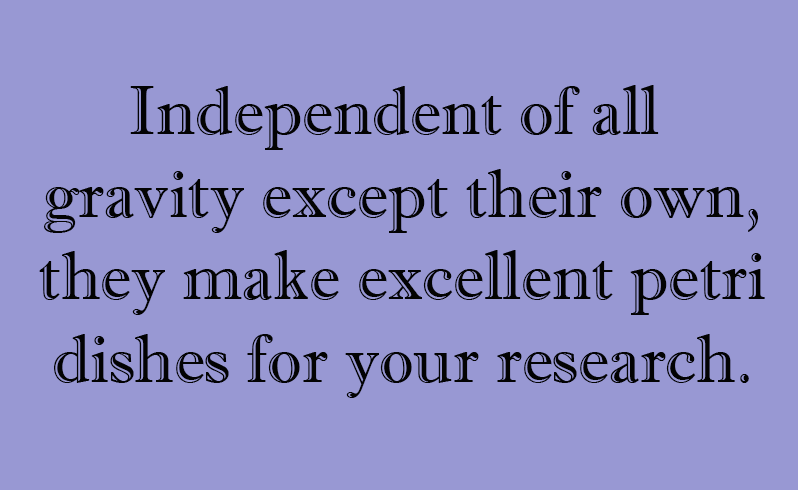
<style>
.page{position:relative;width:798px;height:490px;background:#9898d3}
.page>*{position:absolute;margin:0}
.t1{font:68.7px "ImprintMT-Shadow";color:#030303}
</style>
<div class="page">
<p class="t1" style="left:39px;top:85px;width:726px;height:313px;text-align:center">Independent of all <br>gravity except their own,<br>they make excellent petri<br>dishes for your research.</p>
</div>
